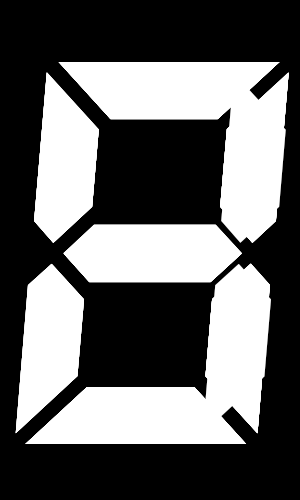
<style>
.page{position:relative;width:300px;height:500px;background:#000000}
.page>*{position:absolute;margin:0}
.t1{font:600.1px "LetsgoDigital-Regular";color:#ffffff}
</style>
<div class="page">
<p class="t1" style="left:15px;top:62px;width:274px;height:382px">0</p>
<p class="t1" style="left:15px;top:62px;width:274px;height:382px">2</p>
<p class="t1" style="left:15px;top:62px;width:265px;height:382px">6</p>
<p class="t1" style="left:15px;top:62px;width:274px;height:382px">8</p>
<p class="t1" style="left:25px;top:62px;width:264px;height:382px">3</p>
<p class="t1" style="left:25px;top:62px;width:255px;height:382px">5</p>
<p class="t1" style="left:25px;top:62px;width:264px;height:382px">9</p>
<p class="t1" style="left:58px;top:62px;width:231px;height:372px">7</p>
<p class="t1" style="left:34px;top:72px;width:255px;height:361px">4</p>
<p class="t1" style="left:202px;top:73px;width:84px;height:361px">1</p>
</div>
